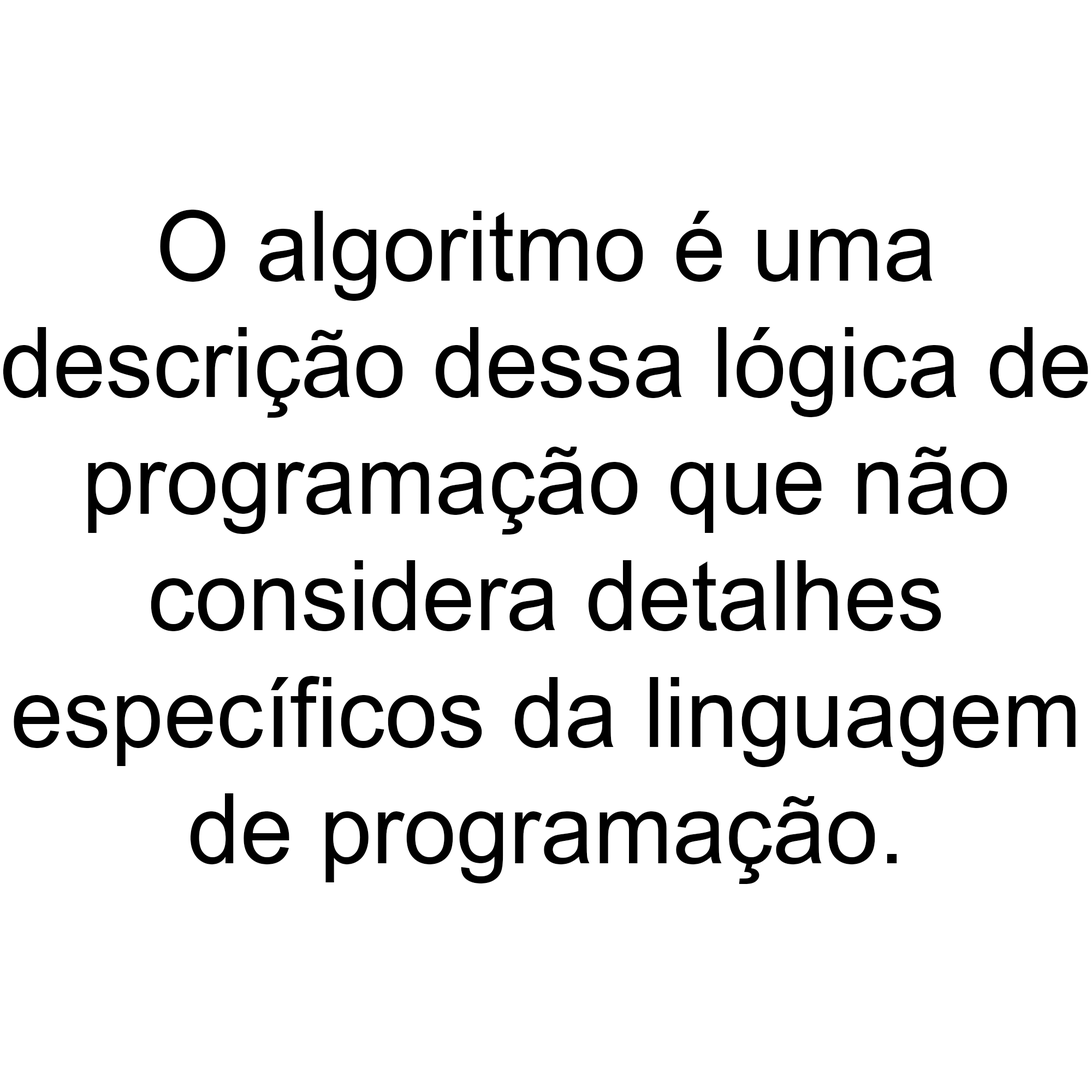
<style>
.page{position:relative;width:1092px;height:1092px;background:#ffffff}
.page>*{position:absolute;margin:0}
.t1{font:97.2px "ArialMT";color:#000000}
</style>
<div class="page">
<p class="t1" style="left:3px;top:210px;width:1085px;height:674px;text-align:center">O algoritmo é uma<br>descrição dessa lógica de<br>programação que não<br>considera detalhes<br>específicos da linguagem<br>de programação.</p>
</div>
